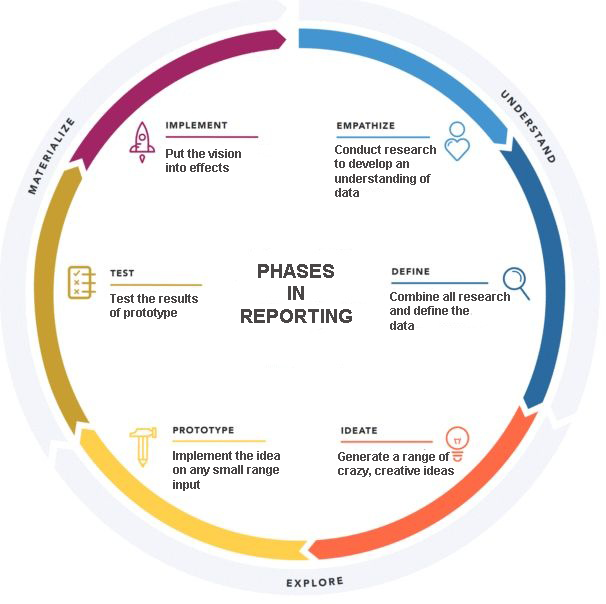
<style>
.page{position:relative;width:606px;height:604px;background:#ffffff}
.page>*{position:absolute;margin:0}
.t1{font:12px "Arial-BoldMT";color:#494646}
.t2{font:18.7px "Arial-BoldMT";color:#494646}
</style>
<div class="page">
<p class="t1" style="left:166px;top:149px;width:75px;height:23px">Put the vision<br>into effects</p>
<p class="t1" style="left:334px;top:145px;width:102px;height:52px">Conduct research<br>to develop an<br>understanding of<br>data</p>
<p class="t2" style="left:241px;top:264px;width:111px;height:59px;text-align:center">PHASES<br>IN<br>REPORTING</p>
<p class="t1" style="left:110px;top:294px;width:88px;height:25px">Test the results<br>of prototype</p>
<p class="t1" style="left:390px;top:292px;width:120px;height:38px">Combine all research<br>and define the<br>data</p>
<p class="t1" style="left:173px;top:451px;width:107px;height:40px">Implement the idea<br>on any small range<br>input</p>
<p class="t1" style="left:338px;top:452px;width:116px;height:25px">Generate a range of<br>crazy, creative ideas</p>
</div>
